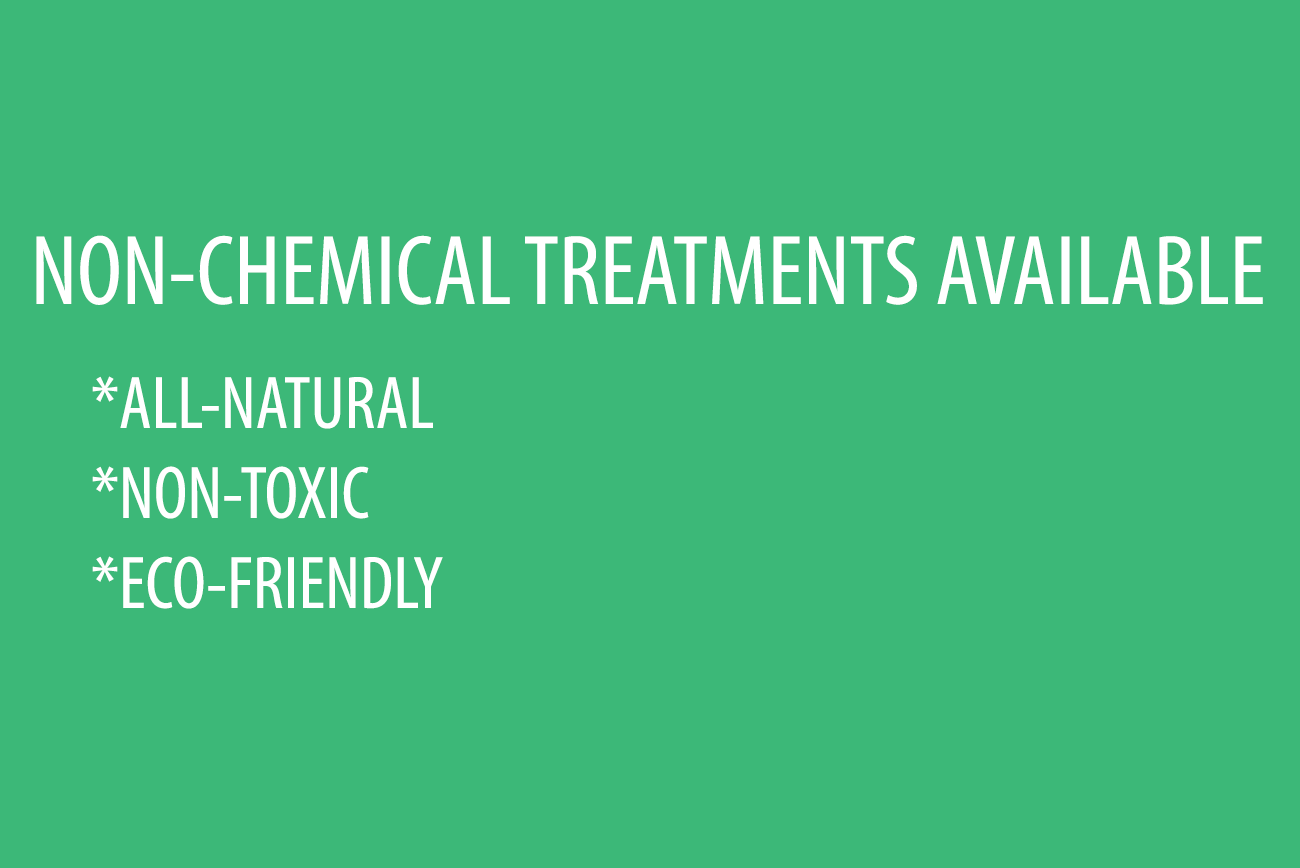
<style>
.page{position:relative;width:1300px;height:868px;background:#3cb878}
.page>*{position:absolute;margin:0}
.t1{font:100px "MyriadPro-Cond";color:#ffffff}
.t2{font:75px "MyriadPro-Cond";color:#ffffff}
</style>
<div class="page">
<p class="t1" style="left:36px;top:235px;width:1227px;height:70px">NON-CHEMICAL TREATMENTS AVAILABLE</p>
<p class="t2" style="left:92px;top:376px;width:351px;height:233px">*ALL-NATURAL<br>*NON-TOXIC<br>*ECO-FRIENDLY</p>
</div>
